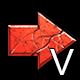
<style>
.page{position:relative;width:80px;height:80px;background:#000000}
.page>*{position:absolute;margin:0}
.t1{font:36px "ArialMT";color:#ffffff}
</style>
<div class="page">
<p class="t1" style="left:50px;top:49px;width:24px;height:26px">V</p>
</div>
